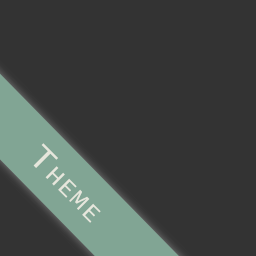
<style>
.page{position:relative;width:256px;height:256px;background:#333333}
.page>*{position:absolute;margin:0}
.t1{font:36px "LucidaConsole";letter-spacing:0.075em;color:#e6e6dc;font-variant:small-caps}
</style>
<div class="page">
<p class="t1" style="left:33px;top:143px;width:68px;height:80px;rotate:45deg">Theme</p>
</div>
